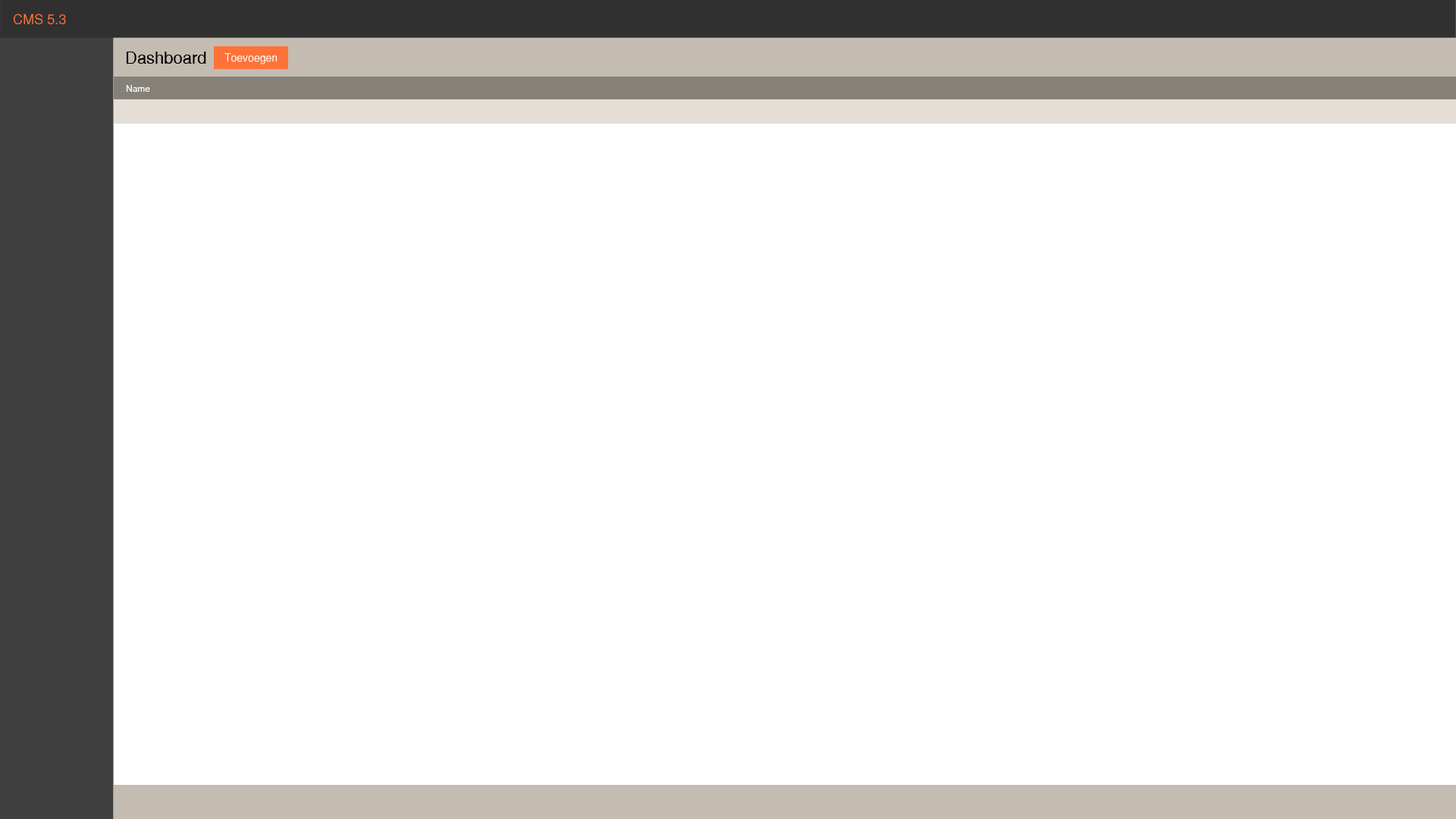
<style>
.page{position:relative;width:1456px;height:819px;background:#ffffff}
.page>*{position:absolute;margin:0}
.t1{font:13.6px "SansSerif";color:#fe7239}
.t2{font:16.7px "SansSerif";color:#000000}
.t3{font:11.4px "SansSerif";color:#ffffff;scale:0.93 1}
.t4{font:9.1px "SansSerif";color:#ffffff}
</style>
<div class="page">
<p class="t1" style="left:14px;top:14px;width:52px;height:10px">CMS 5.3</p>
<p class="t2" style="left:126px;top:52px;width:80px;height:12px">Dashboard</p>
<p class="t3" style="left:224px;top:53px;width:53px;height:11px">Toevoegen</p>
<p class="t4" style="left:126px;top:85px;width:24px;height:7px">Name</p>
</div>
